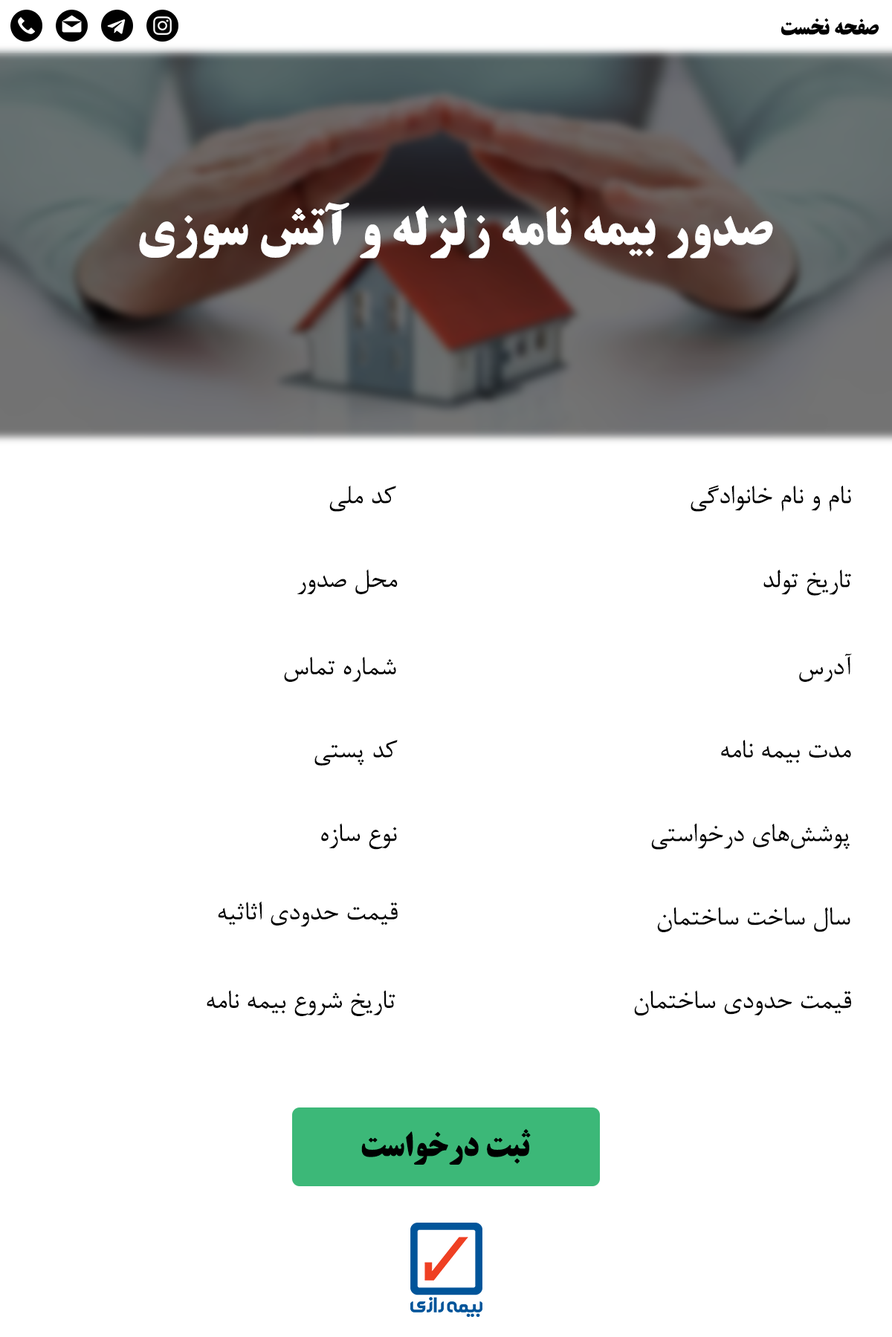
<style>
.page{position:relative;width:892px;height:1337px;background:#ffffff}
.page>*{position:absolute;margin:0}
.t1{font:22.3px "BTitrBold";color:#000000}
.t2{font:52px "BTitrBold";color:#ffffff}
.t3{font:29.7px "BNazanin";color:#000000}
.t4{font:33.4px "BTitrBold";color:#000000}
</style>
<div class="page">
<p class="t1" style="left:781px;top:18px;width:98px;height:18px">صفحه نخست</p>
<p class="t2" style="left:139px;top:202px;width:634px;height:57px">صدور بیمه نامه زلزله و آتش سوزی</p>
<p class="t3" style="left:329px;top:485px;width:67px;height:27px">کد ملی</p>
<p class="t3" style="left:690px;top:485px;width:161px;height:27px">نام و نام خانوادگی</p>
<p class="t3" style="left:297px;top:569px;width:101px;height:25px">محل صدور</p>
<p class="t3" style="left:763px;top:569px;width:88px;height:27px">تاریخ تولد</p>
<p class="t3" style="left:799px;top:654px;width:52px;height:28px">آدرس</p>
<p class="t3" style="left:284px;top:657px;width:112px;height:25px">شماره تماس</p>
<p class="t3" style="left:314px;top:740px;width:84px;height:26px">کد پستی</p>
<p class="t3" style="left:721px;top:740px;width:130px;height:24px">مدت بیمه نامه</p>
<p class="t3" style="left:321px;top:823px;width:76px;height:27px">نوع سازه</p>
<p class="t3" style="left:651px;top:823px;width:198px;height:27px">پوشش‌های درخواستی</p>
<p class="t3" style="left:218px;top:901px;width:180px;height:26px">قیمت حدودی اثاثیه</p>
<p class="t3" style="left:657px;top:907px;width:193px;height:25px">سال ساخت ساختمان</p>
<p class="t3" style="left:207px;top:990px;width:188px;height:26px">تاریخ شروع بیمه نامه</p>
<p class="t3" style="left:634px;top:990px;width:217px;height:26px">قیمت حدودی ساختمان</p>
<p class="t4" style="left:361px;top:1129px;width:170px;height:36px">ثبت درخواست</p>
</div>
